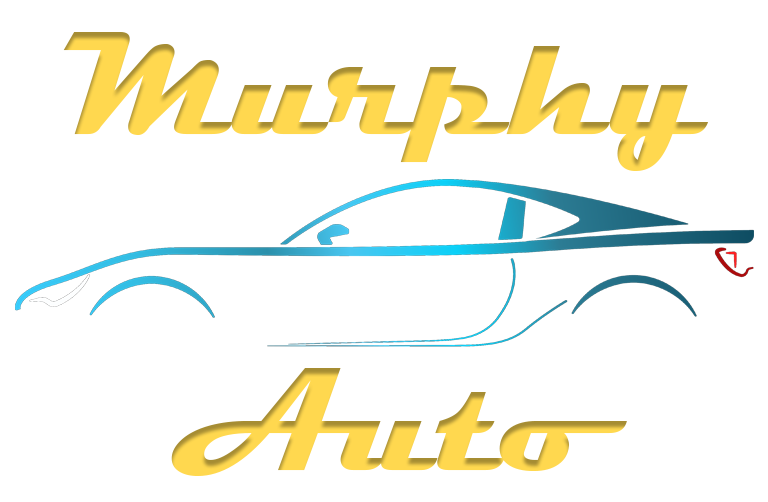
<style>
.page{position:relative;width:768px;height:502px;background:#ffffff}
.page>*{position:absolute;margin:0}
.t1{font:149.4px "Magneto-Bold";color:#ffd84f}
</style>
<div class="page">
<p class="t1" style="left:63px;top:32px;width:646px;height:139px">Murphy</p>
<p class="t1" style="left:171px;top:368px;width:456px;height:108px">Auto</p>
</div>
